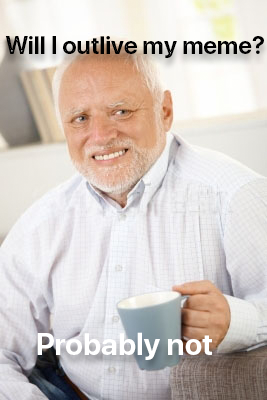
<style>
.page{position:relative;width:267px;height:400px}
.page>*{position:absolute;margin:0}
.t1{font:24px "SFUIDisplay-Bold";color:#000000}
.t2{font:30px "SFUIDisplay-Bold";color:#ffffff}
</style>
<div class="page">
<p class="t1" style="left:5px;top:36px;width:259px;height:22px">Will I outlive my meme?</p>
<p class="t2" style="left:37px;top:332px;width:175px;height:28px">Probably not</p>
</div>
